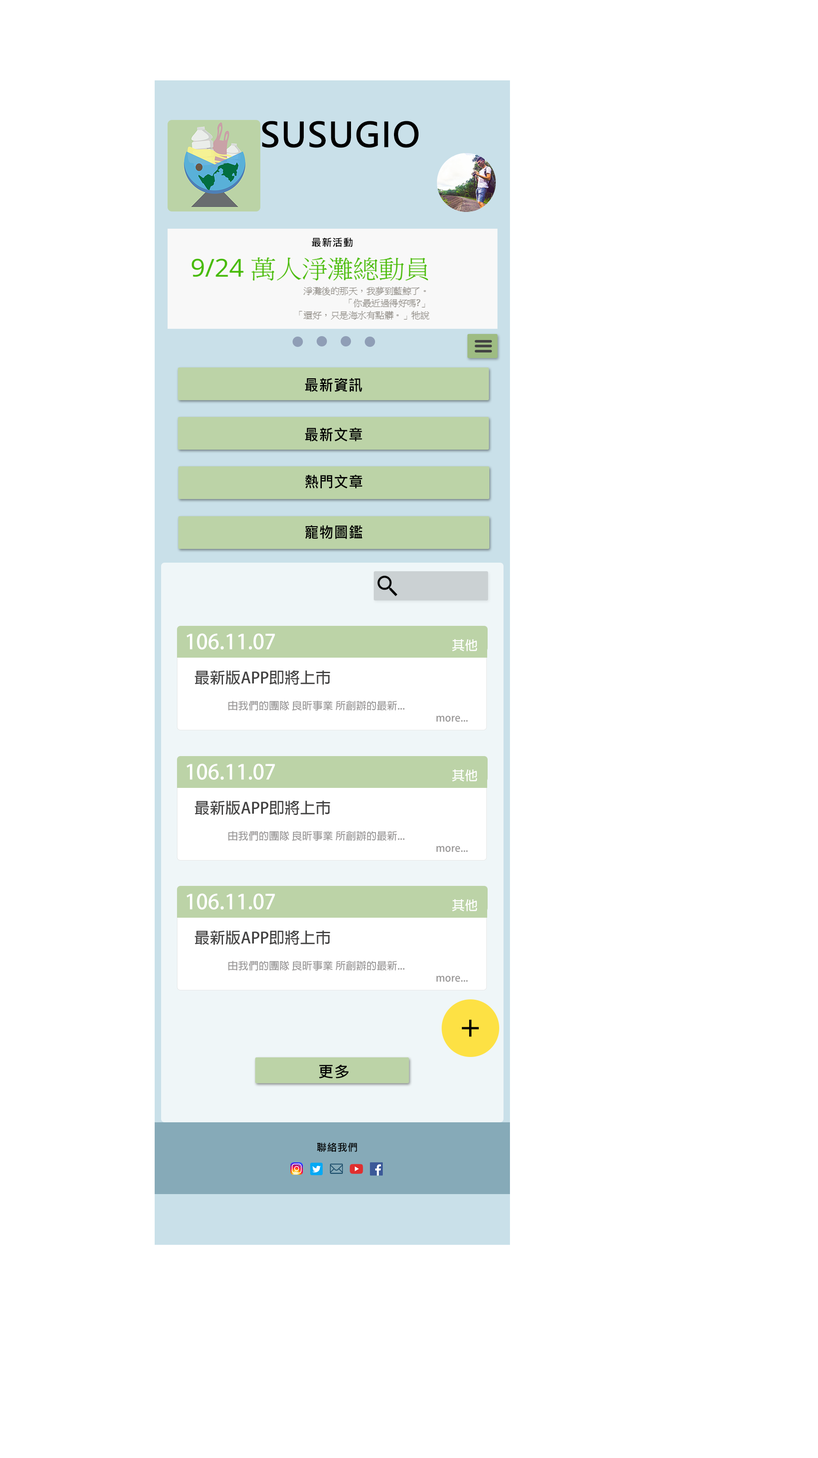
<style>
.page{position:relative;width:818px;height:1458px;background:#ffffff}
.page>*{position:absolute;margin:0}
.t1{font:34px "MicrosoftJhengHeiBold";letter-spacing:0.025em;color:#000000;text-transform:uppercase}
.t2{font:10.3px "MicrosoftJhengHeiBold";letter-spacing:0.025em;color:#000000;text-transform:uppercase}
.t3{font:15.5px "MicrosoftJhengHeiBold";letter-spacing:0.025em;color:#000000;text-transform:uppercase;scale:0.93 1}
.t4{font:20.6px "AdobeFanHeitiStd-Bold";color:#ffffff}
.t5{font:12.9px "MyriadPro-Regular";color:#ffffff}
.t6{font:15.5px "MyriadPro-Regular";color:#424141}
.t7{font:10.3px "MyriadPro-Regular";color:#989696}
.t8{font:34.4px "MicrosoftJhengHeiRegular";color:#000000}
.t9{font:15.5px "MicrosoftJhengHeiBold";letter-spacing:0.025em;color:#000000;text-transform:uppercase}
.t10{font:10.3px "MicrosoftJhengHeiBold";color:#010101}
</style>
<div class="page">
<p class="t1" style="left:262px;top:121px;width:157px;height:27px">susugio</p>
<p class="t2" style="left:312px;top:238px;width:41px;height:9px">最新活動</p>
<p class="t3" style="left:305px;top:378px;width:57px;height:14px">最新資訊</p>
<p class="t3" style="left:305px;top:427px;width:57px;height:14px">最新文章</p>
<p class="t3" style="left:305px;top:474px;width:57px;height:15px">熱門文章</p>
<p class="t3" style="left:305px;top:525px;width:57px;height:14px">寵物圖鑑</p>
<p class="t4" style="left:186px;top:633px;width:89px;height:16px">106.11.07</p>
<p class="t5" style="left:452px;top:639px;width:25px;height:12px">其他</p>
<p class="t6" style="left:195px;top:670px;width:135px;height:14px">最新版APP即將上市</p>
<p class="t7" style="left:228px;top:700px;width:177px;height:10px">由我們的團隊 良昕事業 所創辦的最新...</p>
<p class="t7" style="left:437px;top:715px;width:31px;height:6px">more...</p>
<p class="t4" style="left:186px;top:763px;width:89px;height:16px">106.11.07</p>
<p class="t5" style="left:452px;top:769px;width:25px;height:13px">其他</p>
<p class="t6" style="left:195px;top:800px;width:135px;height:15px">最新版APP即將上市</p>
<p class="t7" style="left:228px;top:831px;width:177px;height:9px">由我們的團隊 良昕事業 所創辦的最新...</p>
<p class="t7" style="left:437px;top:846px;width:31px;height:6px">more...</p>
<p class="t4" style="left:186px;top:893px;width:89px;height:16px">106.11.07</p>
<p class="t5" style="left:452px;top:899px;width:25px;height:12px">其他</p>
<p class="t6" style="left:195px;top:930px;width:135px;height:14px">最新版APP即將上市</p>
<p class="t7" style="left:228px;top:960px;width:177px;height:10px">由我們的團隊 良昕事業 所創辦的最新...</p>
<p class="t7" style="left:437px;top:975px;width:31px;height:6px">more...</p>
<p class="t8" style="left:462px;top:1019px;width:17px;height:17px">+</p>
<p class="t9" style="left:319px;top:1064px;width:29px;height:14px">更多</p>
<p class="t10" style="left:317px;top:1142px;width:40px;height:10px">聯絡我們</p>
</div>
